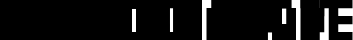
<style>
.page{position:relative;width:353px;height:40px;background:#000000}
.page>*{position:absolute;margin:0}
.t1{font:128px "Minmini-Bold";color:#000000;scale:0.59 1}
</style>
<div class="page">
<p class="t1" style="left:0px;top:0px;width:353px;height:41px">MISSION MODE</p>
</div>
